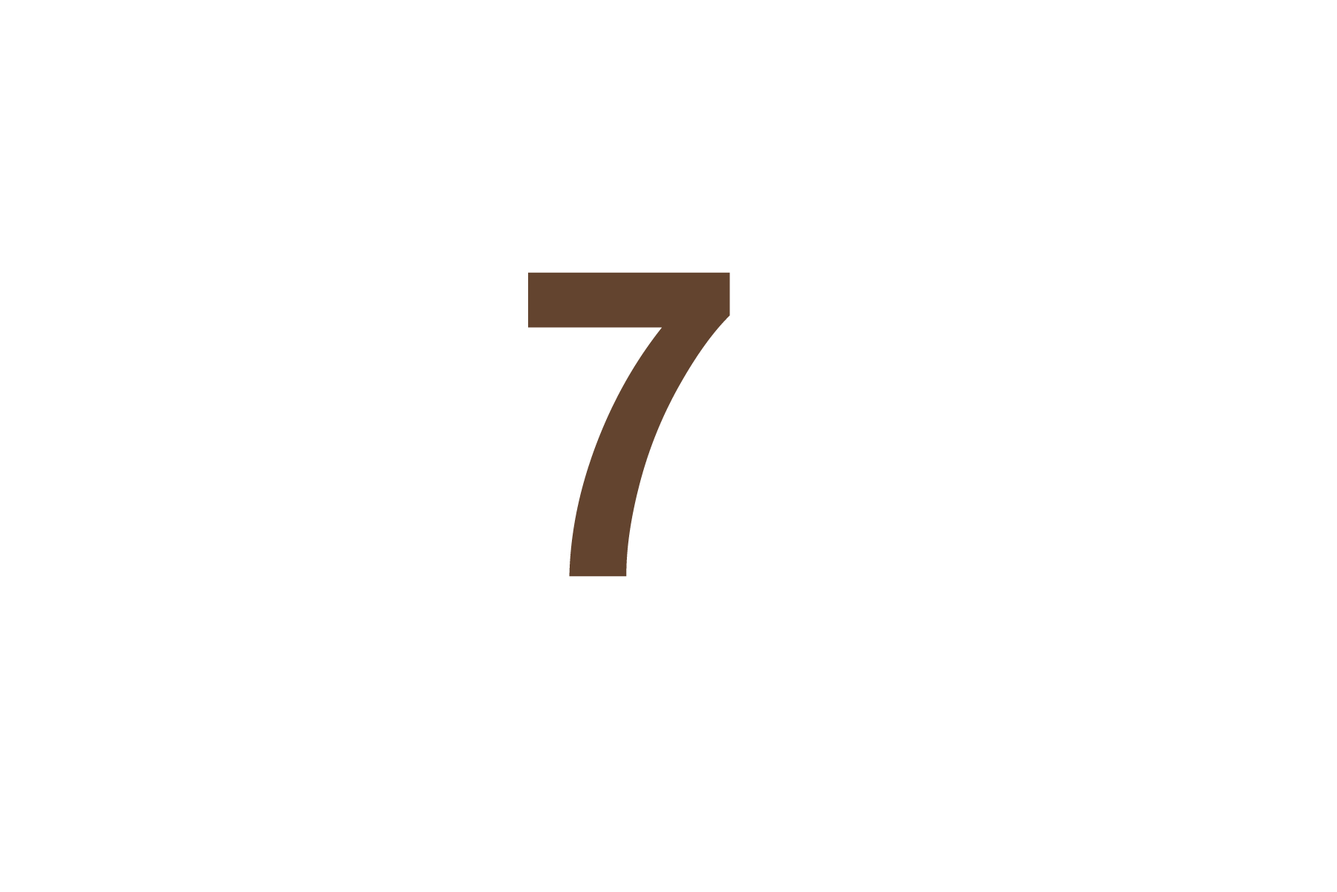
<style>
.page{position:relative;width:1337px;height:892px;background:#ffffff}
.page>*{position:absolute;margin:0}
.t1{font:429.6px "Arial-BoldMT";color:#63442f}
</style>
<div class="page">
<p class="t1" style="left:528px;top:272px;width:202px;height:305px">7</p>
</div>
